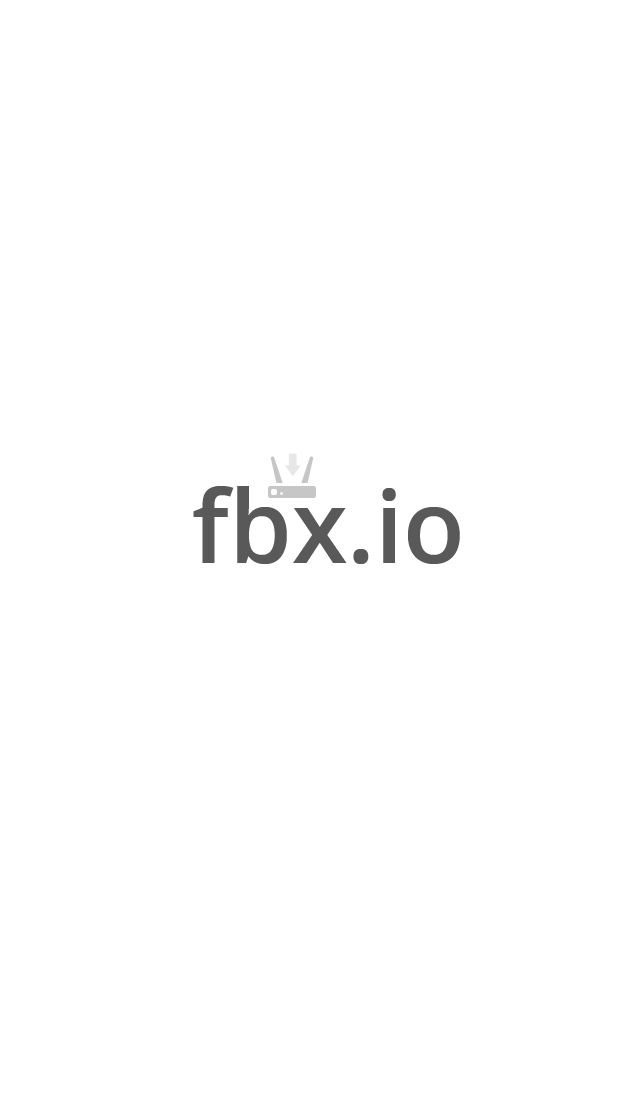
<style>
.page{position:relative;width:640px;height:1096px;background:#ffffff}
.page>*{position:absolute;margin:0}
.t1{font:101px "OpenSans-Semibold";color:#595959}
</style>
<div class="page">
<p class="t1" style="left:193px;top:486px;width:267px;height:78px">fbx.io</p>
</div>
